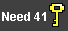
<style>
.page{position:relative;width:68px;height:31px;background:#404040}
.page>*{position:absolute;margin:0}
.t1{font:12px "Arial-BoldMT";color:#ffffff}
</style>
<div class="page">
<p class="t1" style="left:2px;top:12px;width:44px;height:9px">Need 41</p>
</div>
